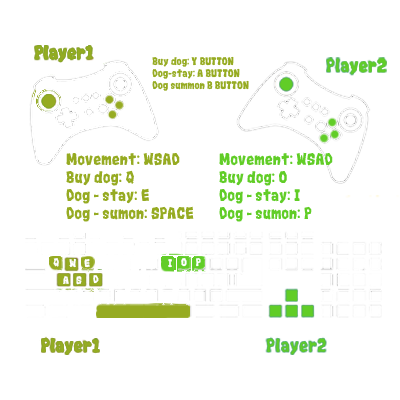
<style>
.page{position:relative;width:400px;height:400px;background:#ffffff}
.page>*{position:absolute;margin:0}
.t1{font:10px "Rocks__G";color:#96ab22}
.t2{font:15.2px "Rocks__G";color:#96ab22}
.t3{font:15.2px "Rocks__G";color:#61cd27}
.t4{font:10px "Rocks__G";color:#ffffff}
</style>
<div class="page">
<p class="t1" style="left:152px;top:56px;width:97px;height:35px">Buy dog: Y BUTTON<br>Dog-stay: A BUTTON<br>Dog summon B BUTTON</p>
<p class="t2" style="left:66px;top:152px;width:128px;height:70px">Movement: WSAD<br>Buy dog: Q<br>Dog - stay: E<br>Dog - sumon: SPACE</p>
<p class="t3" style="left:219px;top:152px;width:114px;height:70px">Movement: WSAD<br>Buy dog: O<br>Dog - stay: I<br>Dog - sumon: P</p>
<p class="t4" style="left:53px;top:258px;width:6px;height:9px">Q</p>
<p class="t4" style="left:69px;top:258px;width:7px;height:10px">W</p>
<p class="t4" style="left:84px;top:259px;width:6px;height:9px">E</p>
<p class="t4" style="left:168px;top:259px;width:4px;height:9px">I</p>
<p class="t4" style="left:181px;top:258px;width:20px;height:9px">O    P</p>
<p class="t4" style="left:63px;top:276px;width:6px;height:8px">A</p>
<p class="t4" style="left:76px;top:276px;width:6px;height:9px">S</p>
<p class="t4" style="left:93px;top:275px;width:6px;height:9px">D</p>
</div>
